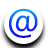
<style>
.page{position:relative;width:48px;height:48px;background:#ffffff}
.page>*{position:absolute;margin:0}
.t1{font:36px "MicrosoftNewTaiLue";letter-spacing:-0.06em}
</style>
<div class="page">
<p class="t1" style="left:9px;top:8px;width:29px;height:30px">@</p>
</div>
